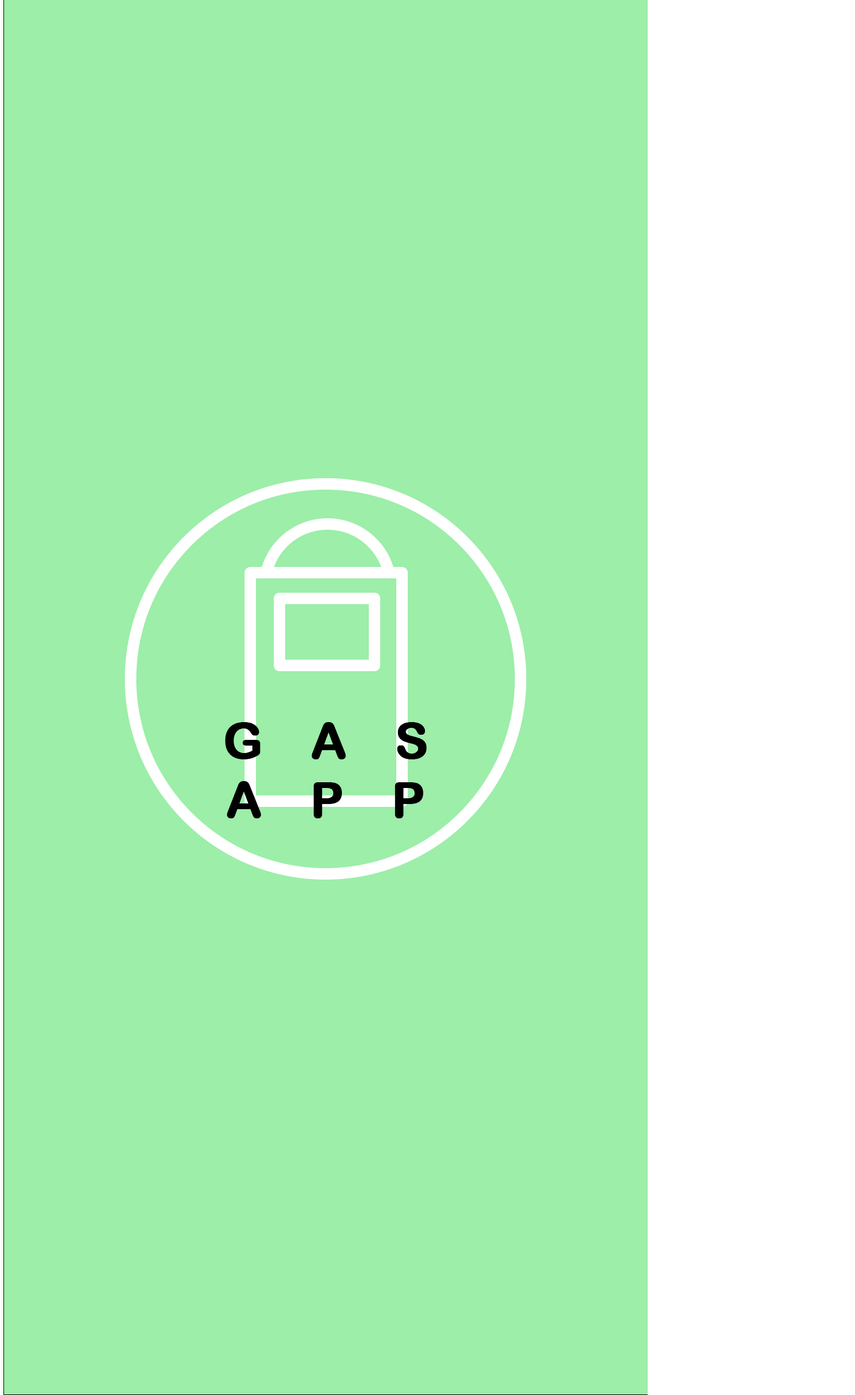
<style>
.page{position:relative;width:855px;height:1395px;background:#9ceea9}
.page>*{position:absolute;margin:0}
.t1{font:49.2px "ArialRoundedMTBold";letter-spacing:0.96em;color:#000000;text-transform:uppercase;font-weight:bold}
</style>
<div class="page">
<p class="t1" style="left:225px;top:722px;width:202px;height:96px;text-align:center">GAS App</p>
</div>
